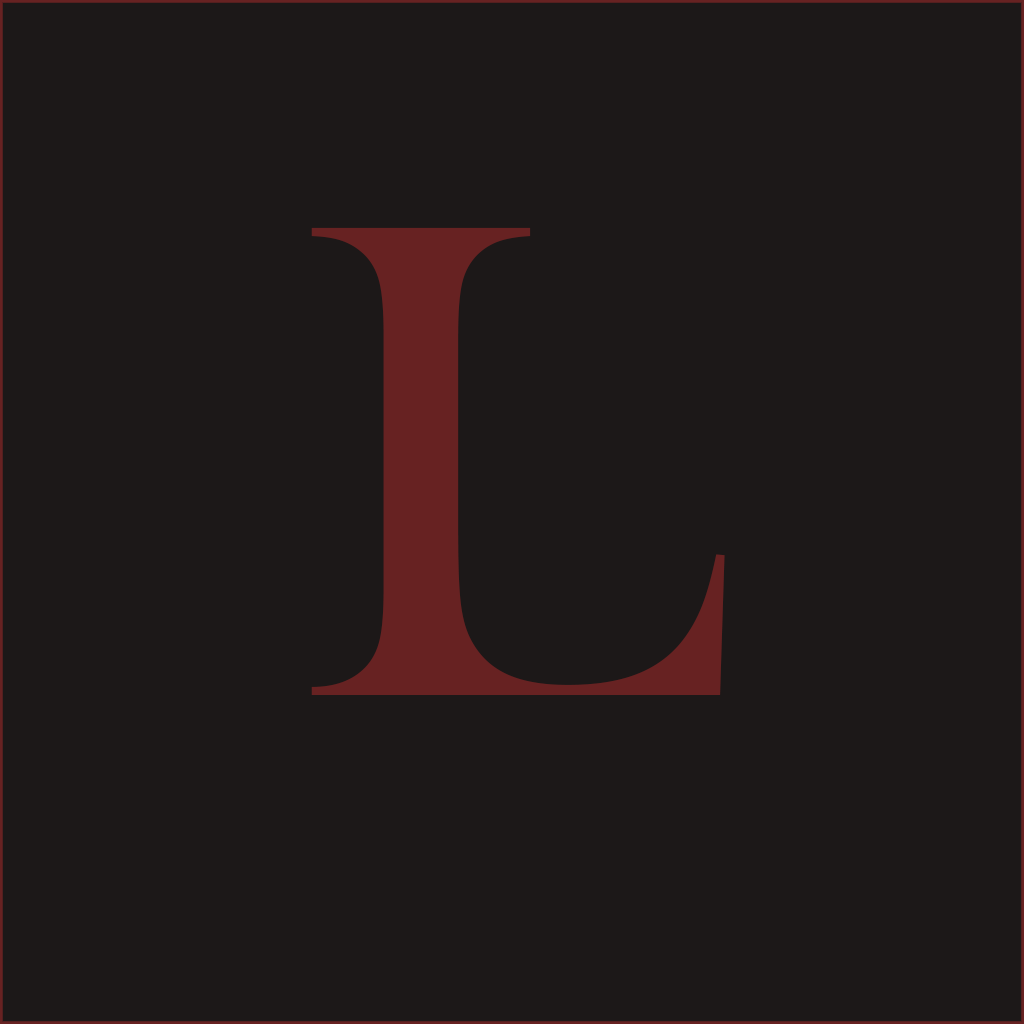
<style>
.page{position:relative;width:1024px;height:1024px;background:#1c1818}
.page>*{position:absolute;margin:0}
.t1{font:700px "BaskOldFace";color:#672222}
</style>
<div class="page">
<p class="t1" style="left:311px;top:227px;width:414px;height:468px">L</p>
</div>
